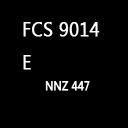
<style>
.page{position:relative;width:128px;height:128px;background:#000000}
.page>*{position:absolute;margin:0}
.t1{font:19.6px/16.7px "SegoeUI";letter-spacing:0.02em;color:#ffffff;font-weight:bold;scale:0.89 1}
.t2{font:11.8px "SegoeUI";letter-spacing:0.02em;color:#ffffff;font-weight:bold;scale:0.89 1}
</style>
<div class="page">
<p class="t1" style="left:23px;top:22px;width:77px;height:48px">FCS 9014<br><br>E</p>
<p class="t2" style="left:45px;top:81px;width:45px;height:10px">NNZ 447</p>
</div>
